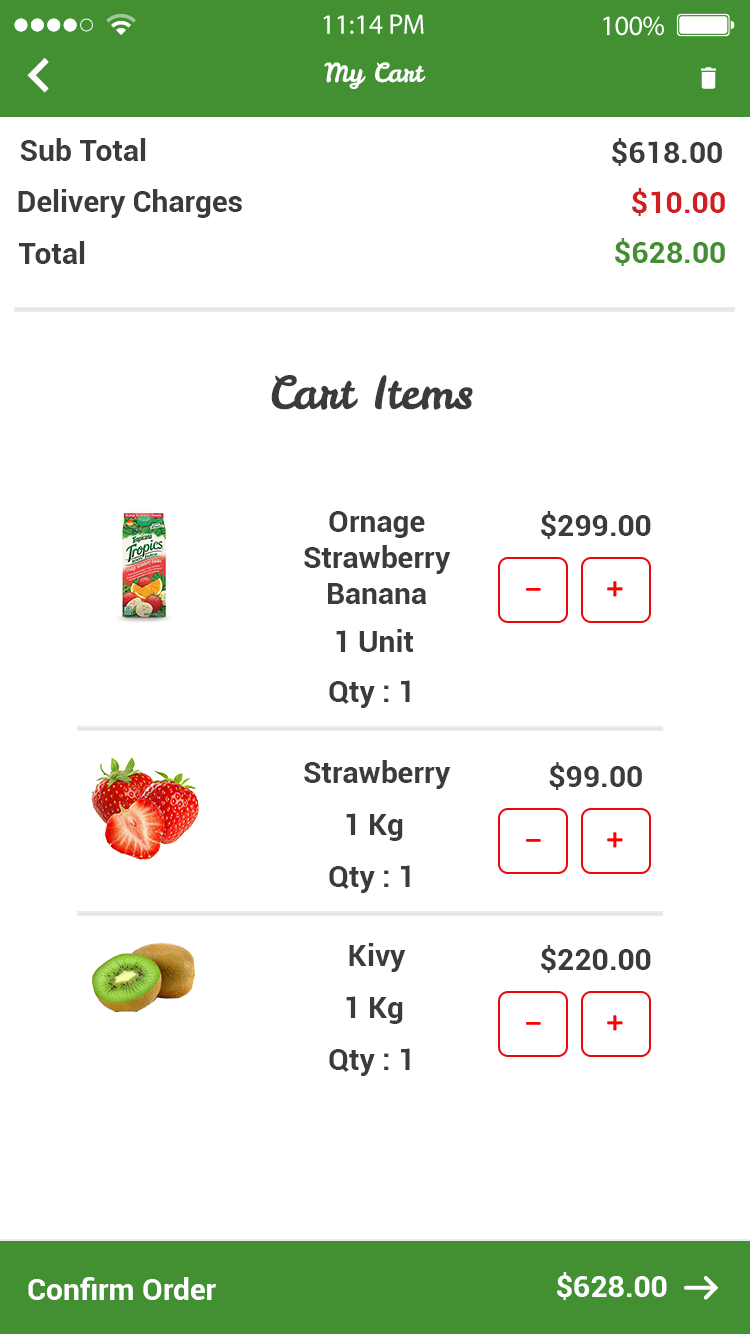
<style>
.page{position:relative;width:750px;height:1334px;background:#ffffff}
.page>*{position:absolute;margin:0}
.t1{font:26px "LeckerliOne-Regular";color:#ffffff}
.t2{font:30px "Roboto-Bold";color:#3b3b3b}
.t3{font:30px "Roboto-Bold";color:#d11e1e}
.t4{font:30px "Roboto-Bold";color:#428f32}
.t5{font:45px "LeckerliOne-Regular";color:#3b3b3b}
.t6{font:30px "Roboto-Bold";color:#ffffff}
</style>
<div class="page">
<p class="t1" style="left:324px;top:62px;width:102px;height:28px">My Cart</p>
<p class="t2" style="left:20px;top:138px;width:126px;height:23px">Sub Total</p>
<p class="t2" style="left:612px;top:138px;width:110px;height:28px">$618.00</p>
<p class="t2" style="left:18px;top:189px;width:224px;height:29px">Delivery Charges</p>
<p class="t3" style="left:632px;top:188px;width:93px;height:28px">$10.00</p>
<p class="t2" style="left:19px;top:241px;width:66px;height:23px">Total</p>
<p class="t4" style="left:615px;top:238px;width:110px;height:28px">$628.00</p>
<p class="t5" style="left:271px;top:375px;width:202px;height:35px">Cart Items</p>
<p class="t2" style="left:304px;top:511px;width:147px;height:93px;text-align:center">Ornage<br>Strawberry<br>Banana</p>
<p class="t2" style="left:541px;top:511px;width:110px;height:28px">$299.00</p>
<p class="t2" style="left:336px;top:629px;width:78px;height:23px">1 Unit</p>
<p class="t2" style="left:329px;top:680px;width:81px;height:28px">Qty : 1</p>
<p class="t2" style="left:304px;top:760px;width:147px;height:29px">Strawberry</p>
<p class="t2" style="left:549px;top:762px;width:93px;height:28px">$99.00</p>
<p class="t2" style="left:346px;top:813px;width:57px;height:28px">1 Kg</p>
<p class="t2" style="left:329px;top:865px;width:81px;height:28px">Qty : 1</p>
<p class="t2" style="left:349px;top:943px;width:57px;height:29px">Kivy</p>
<p class="t2" style="left:541px;top:945px;width:110px;height:28px">$220.00</p>
<p class="t2" style="left:346px;top:996px;width:57px;height:28px">1 Kg</p>
<p class="t2" style="left:329px;top:1048px;width:81px;height:28px">Qty : 1</p>
<p class="t6" style="left:28px;top:1277px;width:188px;height:23px">Confirm Order</p>
<p class="t6" style="left:557px;top:1272px;width:110px;height:28px">$628.00</p>
</div>
